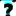
<style>
.page{position:relative;width:16px;height:16px;background:#ffffff}
.page>*{position:absolute;margin:0}
.t1{font:20px "SegoeWP-Black";letter-spacing:-0.016em}
</style>
<div class="page">
<p class="t1" style="left:4px;top:0px;width:9px;height:16px">?</p>
</div>
